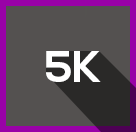
<style>
.page{position:relative;width:136px;height:132px;background:#545150}
.page>*{position:absolute;margin:0}
.t1{font:44px "NexaBold";color:#ffffff}
</style>
<div class="page">
<p class="t1" style="left:46px;top:51px;width:55px;height:31px">5K</p>
</div>
